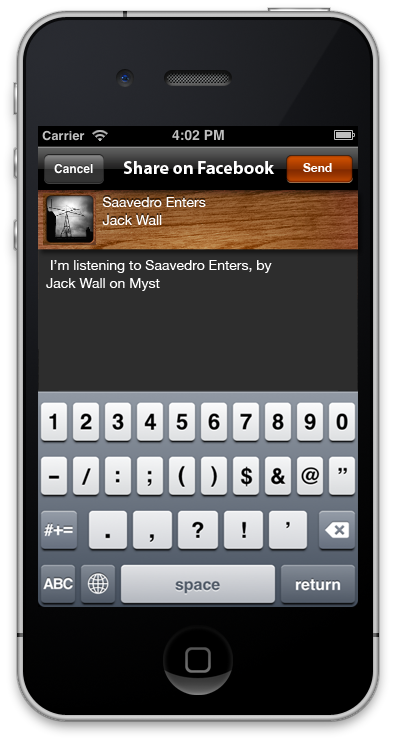
<style>
.page{position:relative;width:396px;height:744px}
.page>*{position:absolute;margin:0}
.t1{font:18px "MyriadPro-Bold";color:#ffffff}
.t2{font:12px "HelveticaNeue-Bold";color:#ffffff}
.t3{font:14px/18px "HelveticaNeue";color:#ffffff}
</style>
<div class="page">
<p class="t1" style="left:123px;top:161px;width:152px;height:13px">Share on Facebook</p>
<p class="t2" style="left:303px;top:163px;width:29px;height:9px">Send</p>
<p class="t3" style="left:102px;top:197px;width:104px;height:28px">Saavedro Enters<br>Jack Wall</p>
<p class="t3" style="left:46px;top:260px;width:226px;height:31px">I’m listening to Saavedro Enters, by <br>Jack Wall on Myst</p>
</div>
